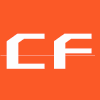
<style>
.page{position:relative;width:100px;height:100px;background:#fb5927}
.page>*{position:absolute;margin:0}
.t1{font:48.7px "Futuren0tFound";letter-spacing:-0.02em;color:#fefefe;font-weight:bold;scale:1.77 1}
</style>
<div class="page">
<p class="t1" style="left:0px;top:33px;width:95px;height:36px">CF</p>
</div>
